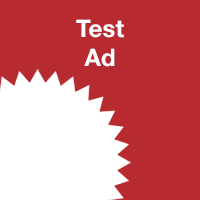
<style>
.page{position:relative;width:200px;height:200px;background:#b62a30}
.page>*{position:absolute;margin:0}
.t1{font:24px "HelveticaNeue-Bold";letter-spacing:0.01em;color:#ffffff}
</style>
<div class="page">
<p class="t1" style="left:76px;top:19px;width:48px;height:48px;text-align:center">Test<br>Ad</p>
</div>
